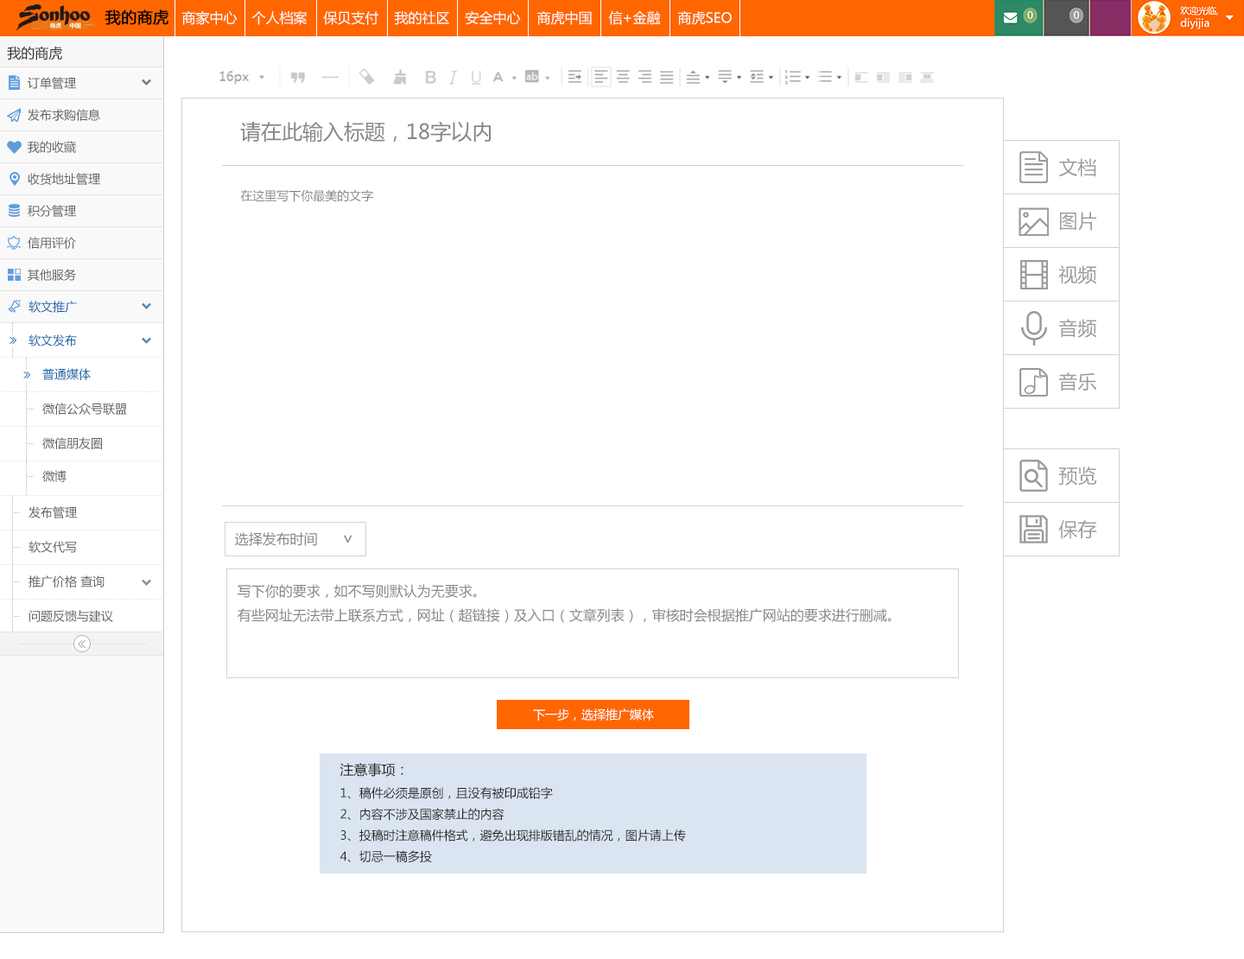
<style>
.page{position:relative;width:1244px;height:959px;background:#ffffff}
.page>*{position:absolute;margin:0}
.t1{font:15.5px "MicrosoftYaHei";color:#000000;font-weight:bold}
.t2{font:13.8px "MicrosoftYaHei";color:#ffffff}
.t3{font:13.8px "MicrosoftYaHei";color:#2d2d2d}
.t4{font:12.1px "MicrosoftYaHei";color:#616161}
.t5{font:20.7px "MicrosoftYaHei";color:#868686}
.t6{font:19px "MicrosoftYaHei";color:#9a9a9a}
.t7{font:12.1px "MicrosoftYaHei";color:#868686}
.t8{font:12.1px "MicrosoftYaHei";color:#1963aa}
.t9{font:3.5px "SimSun";color:#9dbdd6}
.t10{font:3.5px "SimSun";color:#e4e4e4}
.t11{font:13.8px "MicrosoftYaHei";color:#868686}
.t12{font:15.5px "MicrosoftYaHei";color:#636161}
.t13{font:12.1px "MicrosoftYaHei";color:#ffffff}
.t14{font:12.1px "MicrosoftYaHei";color:#262626}
.t15{font:13.8px "MicrosoftYaHei";color:#262626}
</style>
<div class="page">
<p class="t1" style="left:105px;top:10px;width:63px;height:15px">我的商虎</p>
<p class="t2" style="left:181px;top:10px;width:57px;height:15px">商家中心</p>
<p class="t2" style="left:251px;top:11px;width:56px;height:14px">个人档案</p>
<p class="t2" style="left:323px;top:11px;width:55px;height:14px">保贝支付</p>
<p class="t2" style="left:394px;top:11px;width:55px;height:14px">我的社区</p>
<p class="t2" style="left:465px;top:10px;width:56px;height:15px">安全中心</p>
<p class="t2" style="left:536px;top:11px;width:56px;height:14px">商虎中国</p>
<p class="t2" style="left:608px;top:10px;width:53px;height:15px">信+金融</p>
<p class="t2" style="left:677px;top:11px;width:55px;height:14px">商虎SEO</p>
<p class="t3" style="left:7px;top:46px;width:55px;height:14px">我的商虎</p>
<p class="t4" style="left:28px;top:77px;width:48px;height:12px">订单管理</p>
<p class="t4" style="left:28px;top:109px;width:72px;height:12px">发布求购信息</p>
<p class="t5" style="left:240px;top:121px;width:251px;height:22px">请在此输入标题，18字以内</p>
<p class="t4" style="left:28px;top:141px;width:48px;height:12px">我的收藏</p>
<p class="t6" style="left:1059px;top:158px;width:37px;height:19px">文档</p>
<p class="t4" style="left:28px;top:173px;width:72px;height:12px">收货地址管理</p>
<p class="t7" style="left:240px;top:189px;width:133px;height:13px">在这里写下你最美的文字</p>
<p class="t4" style="left:28px;top:205px;width:48px;height:12px">积分管理</p>
<p class="t6" style="left:1060px;top:212px;width:36px;height:19px">图片</p>
<p class="t4" style="left:28px;top:237px;width:48px;height:12px">信用评价</p>
<p class="t4" style="left:28px;top:269px;width:48px;height:12px">其他服务</p>
<p class="t6" style="left:1058px;top:265px;width:39px;height:19px">视频</p>
<p class="t8" style="left:29px;top:301px;width:48px;height:12px">软文推广</p>
<p class="t9" style="left:12px;top:323px;width:1px;height:11px">.......</p>
<p class="t6" style="left:1058px;top:319px;width:39px;height:19px">音频</p>
<p class="t8" style="left:29px;top:334px;width:48px;height:12px">软文发布</p>
<p class="t9" style="left:12px;top:347px;width:1px;height:10px">......</p>
<p class="t10" style="left:1px;top:357px;width:161px;height:1px">..............................................................................................</p>
<p class="t9" style="left:26px;top:358px;width:1px;height:11px">.......</p>
<p class="t8" style="left:42px;top:368px;width:49px;height:12px">普通媒体</p>
<p class="t6" style="left:1058px;top:372px;width:39px;height:19px">音乐</p>
<p class="t9" style="left:26px;top:382px;width:1px;height:9px">......</p>
<p class="t10" style="left:1px;top:391px;width:161px;height:1px">..............................................................................................</p>
<p class="t9" style="left:26px;top:392px;width:1px;height:34px">....................</p>
<p class="t9" style="left:28px;top:409px;width:6px;height:0px">....</p>
<p class="t4" style="left:42px;top:402px;width:85px;height:13px">微信公众号联盟</p>
<p class="t10" style="left:1px;top:426px;width:161px;height:1px">..............................................................................................</p>
<p class="t9" style="left:26px;top:427px;width:1px;height:33px">....................</p>
<p class="t4" style="left:42px;top:437px;width:60px;height:12px">微信朋友圈</p>
<p class="t9" style="left:28px;top:443px;width:6px;height:1px">....</p>
<p class="t10" style="left:1px;top:460px;width:161px;height:1px">..............................................................................................</p>
<p class="t9" style="left:26px;top:461px;width:1px;height:34px">....................</p>
<p class="t4" style="left:42px;top:470px;width:25px;height:12px">微博</p>
<p class="t6" style="left:1058px;top:466px;width:39px;height:19px">预览</p>
<p class="t9" style="left:28px;top:476px;width:6px;height:1px">....</p>
<p class="t10" style="left:1px;top:495px;width:161px;height:1px">..............................................................................................</p>
<p class="t9" style="left:12px;top:496px;width:1px;height:42px">.........................</p>
<p class="t4" style="left:29px;top:506px;width:48px;height:12px">发布管理</p>
<p class="t9" style="left:12px;top:520px;width:1px;height:42px">.........................</p>
<p class="t9" style="left:14px;top:512px;width:6px;height:1px">....</p>
<p class="t6" style="left:1058px;top:520px;width:39px;height:19px">保存</p>
<p class="t10" style="left:1px;top:529px;width:161px;height:1px">..............................................................................................</p>
<p class="t11" style="left:235px;top:532px;width:117px;height:14px">选择发布时间      <span class="t12">∨</span></p>
<p class="t4" style="left:29px;top:541px;width:48px;height:12px">软文代写</p>
<p class="t9" style="left:12px;top:555px;width:1px;height:42px">.........................</p>
<p class="t9" style="left:12px;top:555px;width:1px;height:42px">.........................</p>
<p class="t9" style="left:12px;top:555px;width:1px;height:42px">.........................</p>
<p class="t9" style="left:14px;top:547px;width:6px;height:1px">....</p>
<p class="t10" style="left:1px;top:564px;width:161px;height:1px">..............................................................................................</p>
<p class="t9" style="left:14px;top:581px;width:6px;height:1px">....</p>
<p class="t4" style="left:29px;top:575px;width:76px;height:12px">推广价格 查询</p>
<p class="t9" style="left:12px;top:589px;width:1px;height:42px">.........................</p>
<p class="t11" style="left:238px;top:584px;width:653px;height:39px">写下你的要求，如不写则默认为无要求。<br>有些网址无法带上联系方式，网址（超链接）及入口（文章列表），审核时会根据推广网站的要求进行删减。</p>
<p class="t10" style="left:1px;top:599px;width:161px;height:0px">..............................................................................................</p>
<p class="t9" style="left:14px;top:616px;width:6px;height:1px">....</p>
<p class="t4" style="left:29px;top:610px;width:84px;height:12px">问题反馈与建议</p>
<p class="t13" style="left:533px;top:708px;width:121px;height:12px">下一步，选择推广媒体</p>
<p class="t14" style="left:339px;top:763px;width:347px;height:100px"><span class="t15">注意事项：</span> <br>1、稿件必须是原创，且没有被印成铅字<br>2、内容不涉及国家禁止的内容<br>3、投稿时注意稿件格式，避免出现排版错乱的情况，图片请上传<br>4、切忌一稿多投</p>
</div>
